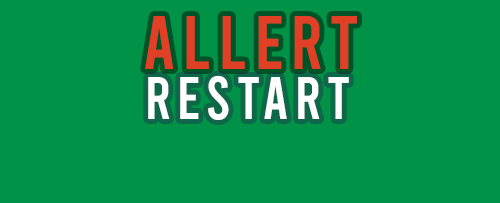
<style>
.page{position:relative;width:500px;height:203px;background:#009246}
.page>*{position:absolute;margin:0}
.t1{font:75px "Bebas-Regular";letter-spacing:0.1em;color:#e14027}
.t2{font:60px "Bebas-Regular";letter-spacing:0.1em;color:#ffffff}
</style>
<div class="page">
<p class="t1" style="left:145px;top:16px;width:212px;height:53px">ALLERT</p>
<p class="t2" style="left:148px;top:75px;width:201px;height:45px">RESTART</p>
</div>
